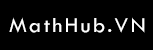
<style>
.page{position:relative;width:153px;height:50px;background:#000000}
.page>*{position:absolute;margin:0}
.t1{font:22px "TwCenMT-Regular";letter-spacing:0.1em;color:#ffffff;scale:1.03 1}
</style>
<div class="page">
<p class="t1" style="left:9px;top:17px;width:136px;height:16px">MathHub.VN</p>
</div>
